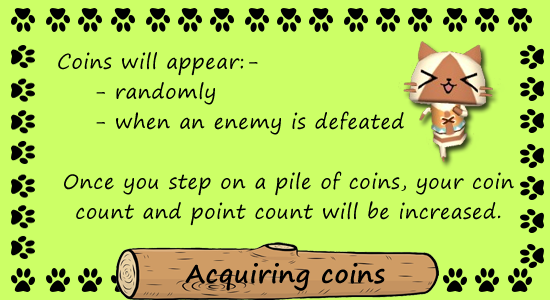
<style>
.page{position:relative;width:550px;height:300px;background:#ccff66}
.page>*{position:absolute;margin:0}
.t1{font:20px/30px "SegoePrint";letter-spacing:0.025em;color:#000000}
.t2{font:25px "SegoePrint-Bold";letter-spacing:0.025em;color:#000000}
</style>
<div class="page">
<p class="t1" style="left:58px;top:52px;width:456px;height:174px">Coins will appear:- <br> - randomly <br> - when an enemy is defeated<br><br>Once you step on a pile of coins, your coin count and point count will be increased.</p>
<p class="t2" style="left:185px;top:263px;width:200px;height:28px">Acquiring coins</p>
</div>
